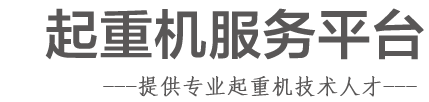
<style>
.page{position:relative;width:429px;height:102px;background:#ffffff}
.page>*{position:absolute;margin:0}
.t1{font:53.5px "FZLTZHK--GBK1-0";letter-spacing:-0.01em;color:#595757;font-weight:bold}
.t2{font:22px "FangSong";letter-spacing:-0.01em;color:#595757;font-weight:bold}
</style>
<div class="page">
<p class="t1" style="left:45px;top:8px;width:379px;height:52px">起重机服务平台</p>
<p class="t2" style="left:103px;top:76px;width:314px;height:21px">---提供专业起重机技术人才---</p>
</div>
